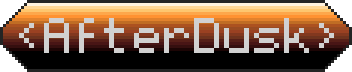
<style>
.page{position:relative;width:352px;height:72px;background:#000000}
.page>*{position:absolute;margin:0}
.t1{font:50px "undefined-medium";color:#d1d1d1}
</style>
<div class="page">
<p class="t1" style="left:19px;top:18px;width:315px;height:35px">&lt;AfterDusk&gt;</p>
</div>
